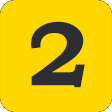
<style>
.page{position:relative;width:112px;height:112px;background:#ffd700}
.page>*{position:absolute;margin:0}
.t1{font:91.7px "BookmanOldStyle-Bold";color:#2b2d31}
</style>
<div class="page">
<p class="t1" style="left:31px;top:21px;width:54px;height:67px">2</p>
</div>
